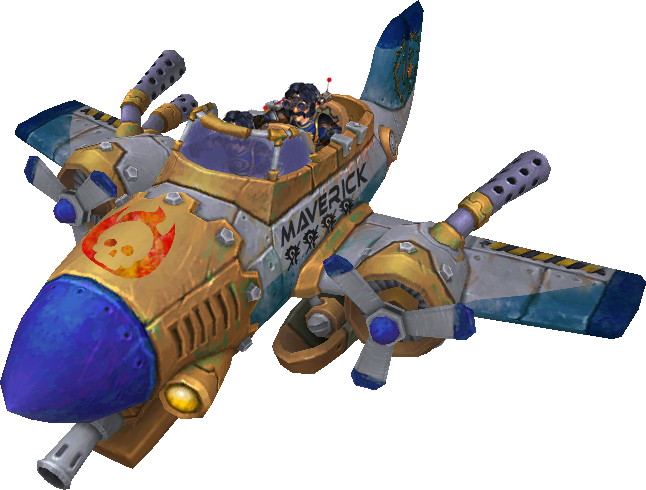
<style>
.page{position:relative;width:646px;height:490px;background:#ffffff}
.page>*{position:absolute;margin:0}
.t1{font:26px "Ethnocentric";letter-spacing:0.05em;color:#232326;scale:0.54 1}
</style>
<div class="page">
<p class="t1" style="left:281px;top:161px;width:87px;height:87px;rotate:-38deg">MAVERICK</p>
</div>
